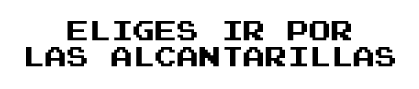
<style>
.page{position:relative;width:419px;height:89px;background:#ffffff}
.page>*{position:absolute;margin:0}
.t1{font:22px "PressStart2P";color:#000000}
</style>
<div class="page">
<p class="t1" style="left:26px;top:21px;width:369px;height:46px;text-align:center">ELIGES IR POR<br>LAS ALCANTARILLAS</p>
</div>
